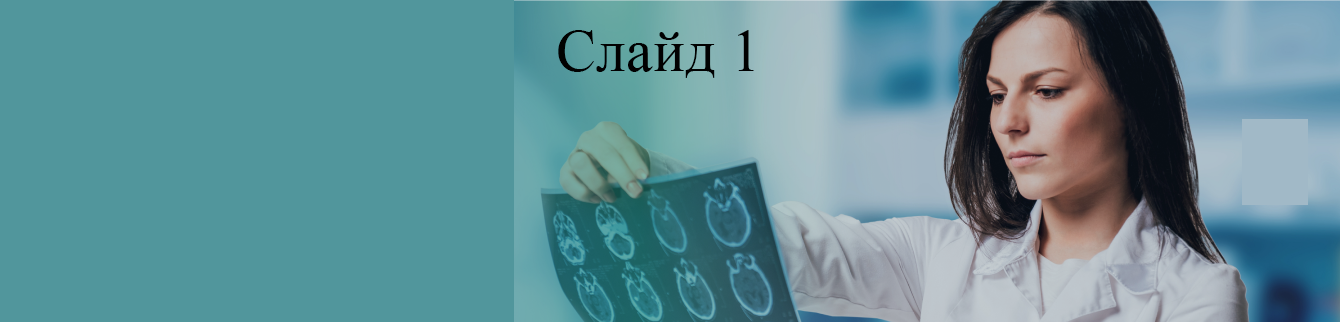
<style>
.page{position:relative;width:1340px;height:322px;background:#51969c}
.page>*{position:absolute;margin:0}
.t1{font:60px "TimesNewRomanPSMT";color:#010101}
</style>
<div class="page">
<p class="t1" style="left:558px;top:30px;width:196px;height:48px">Слайд 1</p>
</div>
